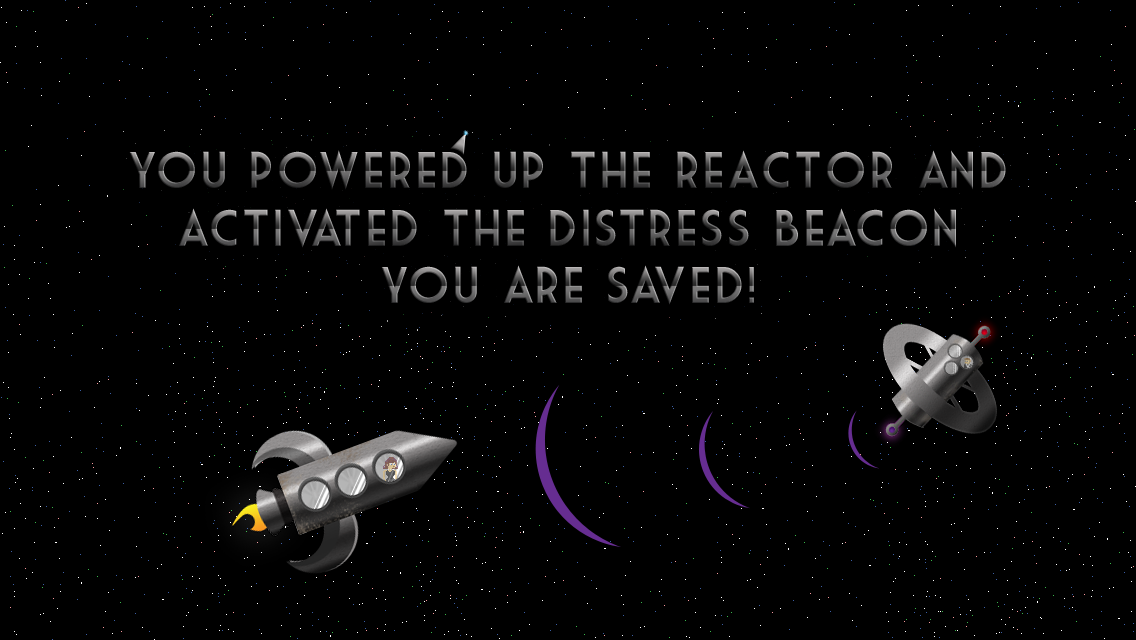
<style>
.page{position:relative;width:1136px;height:640px;background:#000000}
.page>*{position:absolute;margin:0}
.t1{font:50px "MarketDeco";letter-spacing:0.04em}
</style>
<div class="page">
<p class="t1" style="left:129px;top:150px;width:877px;height:40px">You powered up the reactor and</p>
<p class="t1" style="left:179px;top:208px;width:777px;height:40px">activated the distress beacon</p>
<p class="t1" style="left:381px;top:265px;width:373px;height:40px">you are saved!</p>
</div>
